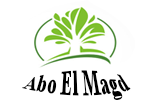
<style>
.page{position:relative;width:150px;height:100px;background:#ffffff}
.page>*{position:absolute;margin:0}
.t1{font:18px "TimesNewRomanPS-BoldMT";color:#000000}
</style>
<div class="page">
<p class="t1" style="left:22px;top:70px;width:109px;height:30px">Abo El Magd</p>
</div>
